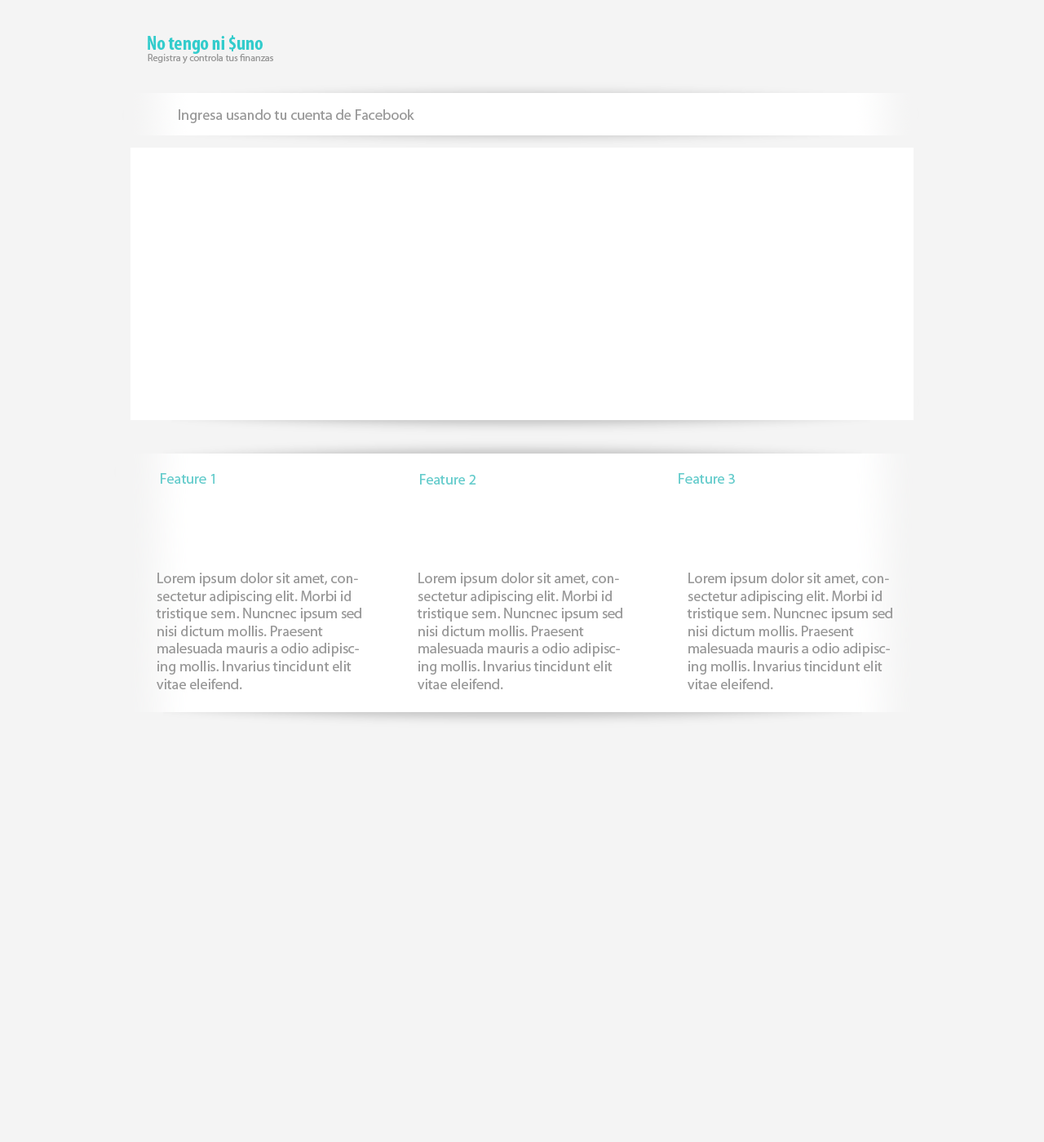
<style>
.page{position:relative;width:1044px;height:1142px;background:#f4f4f4}
.page>*{position:absolute;margin:0}
.t1{font:19.6px "MyriadPro-BoldCond";color:#33cccc}
.t2{font:9.8px "MyriadPro-Regular";color:#999999}
.t3{font:14.7px "MyriadPro-Regular";color:#999999}
.t4{font:14.7px "MyriadPro-Regular";color:#66cccc}
</style>
<div class="page">
<p class="t1" style="left:148px;top:35px;width:115px;height:19px">No tengo ni $uno</p>
<p class="t2" style="left:148px;top:54px;width:125px;height:10px">Registra y controla tus finanzas</p>
<p class="t3" style="left:179px;top:109px;width:235px;height:14px">Ingresa usando tu cuenta de Facebook</p>
<p class="t4" style="left:161px;top:473px;width:54px;height:11px">Feature 1</p>
<p class="t4" style="left:420px;top:474px;width:56px;height:11px">Feature 2</p>
<p class="t4" style="left:679px;top:473px;width:56px;height:11px">Feature 3</p>
<p class="t3" style="left:156px;top:573px;width:205px;height:116px">Lorem ipsum dolor sit amet, consectetur adipiscing elit. Morbi id tristique sem. Nuncnec ipsum sed nisi dictum mollis. Praesent malesuada mauris a odio adipiscing mollis. Invarius tincidunt elit vitae eleifend.</p>
<p class="t3" style="left:417px;top:573px;width:205px;height:116px">Lorem ipsum dolor sit amet, consectetur adipiscing elit. Morbi id tristique sem. Nuncnec ipsum sed nisi dictum mollis. Praesent malesuada mauris a odio adipiscing mollis. Invarius tincidunt elit vitae eleifend.</p>
<p class="t3" style="left:687px;top:573px;width:205px;height:116px">Lorem ipsum dolor sit amet, consectetur adipiscing elit. Morbi id tristique sem. Nuncnec ipsum sed nisi dictum mollis. Praesent malesuada mauris a odio adipiscing mollis. Invarius tincidunt elit vitae eleifend.</p>
</div>
